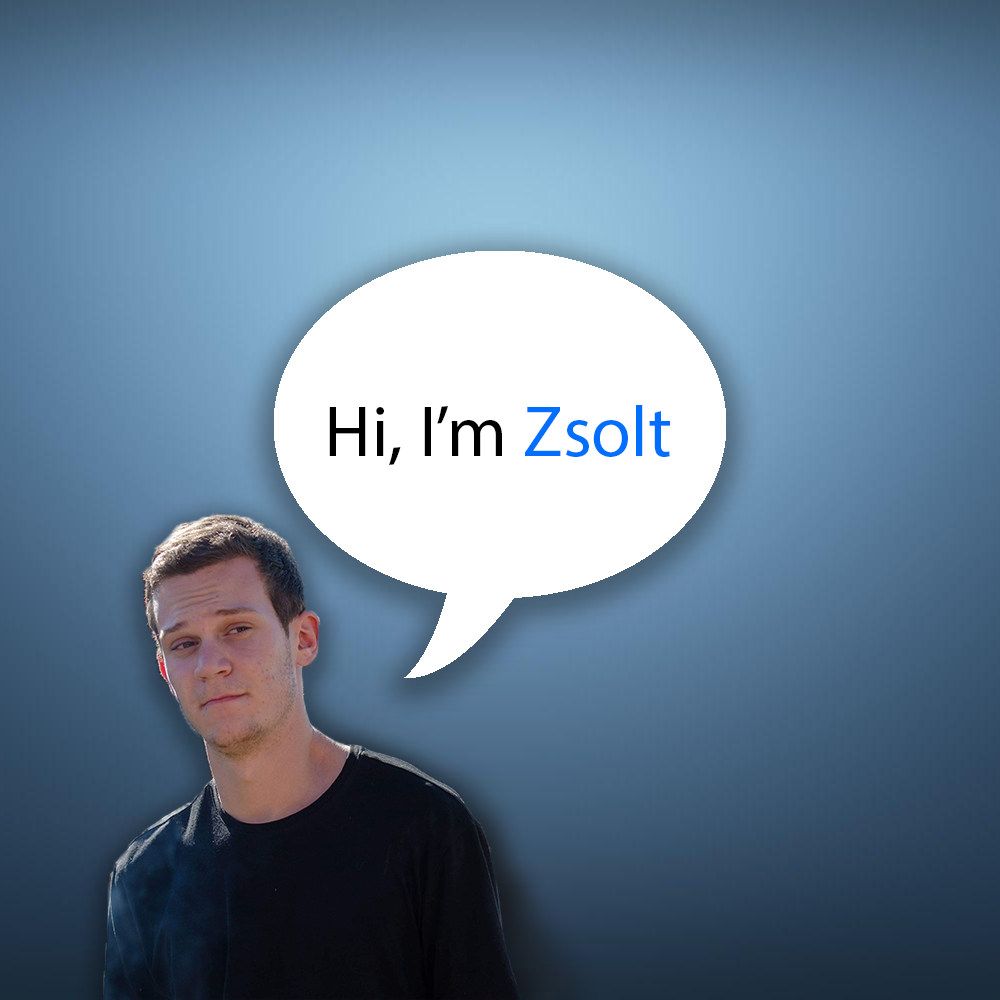
<style>
.page{position:relative;width:1000px;height:1000px}
.page>*{position:absolute;margin:0}
.t1{font:72px "MyriadPro-Regular";color:#000000}
.t2{font:72px "MyriadPro-Regular";color:#006eff}
</style>
<div class="page">
<p class="t1" style="left:329px;top:405px;width:341px;height:60px">Hi, I’m <span class="t2">Zsolt</span></p>
</div>
